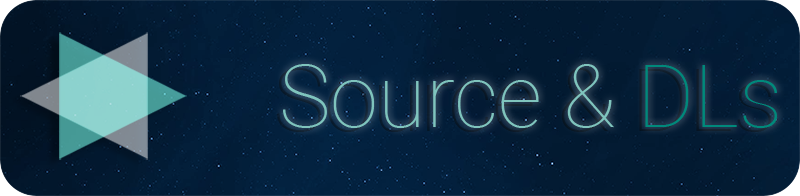
<style>
.page{position:relative;width:800px;height:196px}
.page>*{position:absolute;margin:0}
.t1{font:87.3px "Roboto-Thin";color:#7fc4bd}
</style>
<div class="page">
<p class="t1" style="left:283px;top:64px;width:494px;height:64px">Source &amp; DLs</p>
</div>
